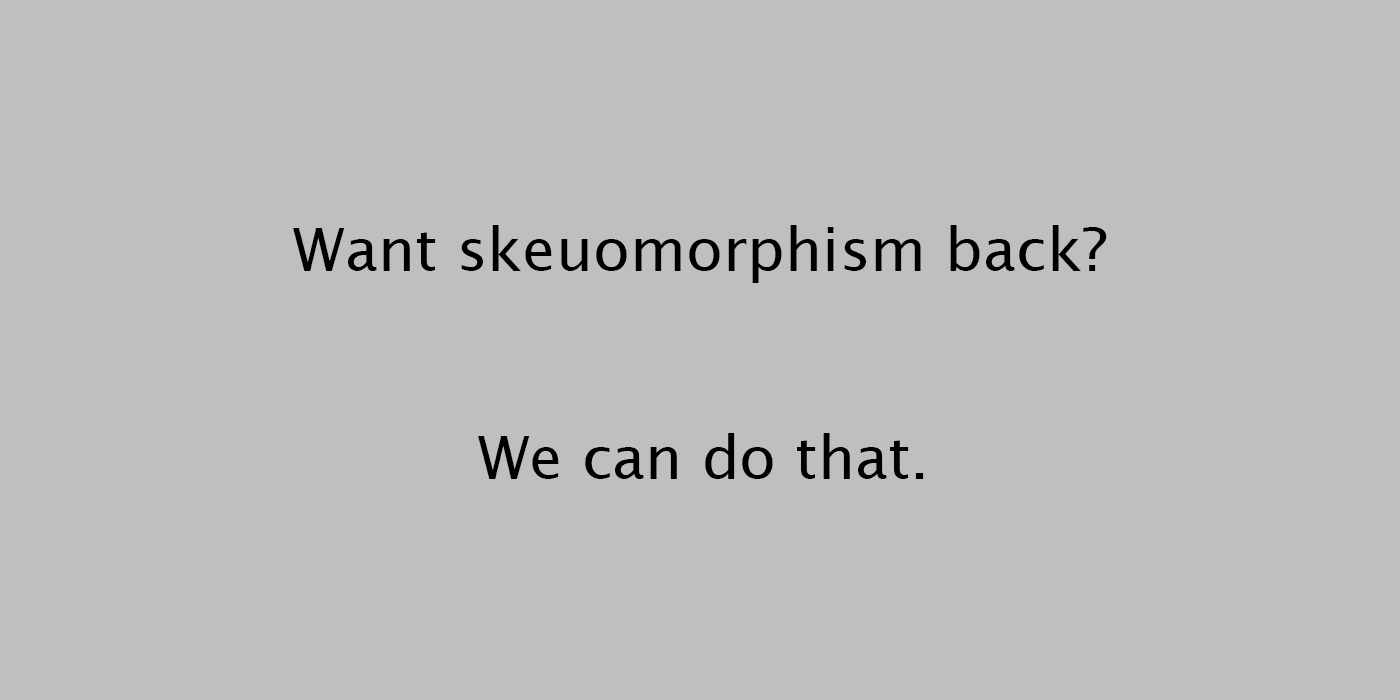
<style>
.page{position:relative;width:1400px;height:700px;background:#bfbfbf}
.page>*{position:absolute;margin:0}
.t1{font:60px "LucidaSans";color:#000000}
</style>
<div class="page">
<p class="t1" style="left:293px;top:225px;width:814px;height:58px">Want skeuomorphism back?</p>
<p class="t1" style="left:478px;top:433px;width:446px;height:46px">We can do that.</p>
</div>
